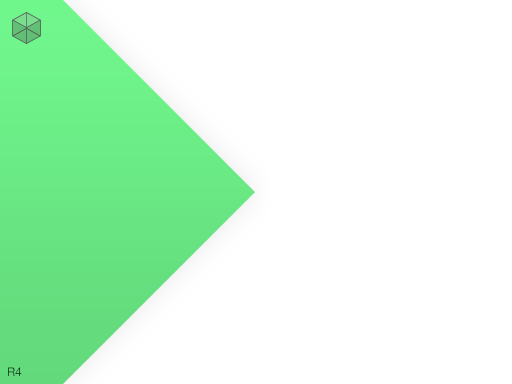
<style>
.page{position:relative;width:512px;height:384px;background:#ffffff}
.page>*{position:absolute;margin:0}
.t1{font:12px "HelveticaNeue-Light"}
</style>
<div class="page">
<p class="t1" style="left:8px;top:367px;width:14px;height:9px">R4</p>
</div>
